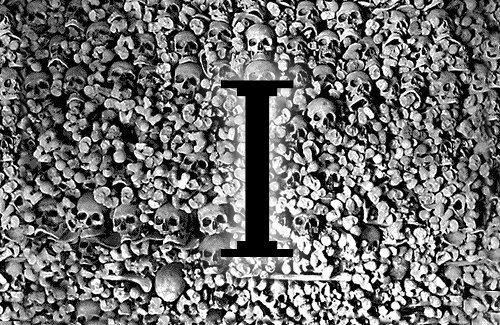
<style>
.page{position:relative;width:500px;height:325px}
.page>*{position:absolute;margin:0}
.t1{font:257px "MS Serif";letter-spacing:-0.02em;color:#000000}
</style>
<div class="page">
<p class="t1" style="left:221px;top:80px;width:73px;height:177px">I</p>
</div>
